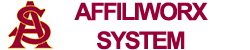
<style>
.page{position:relative;width:250px;height:50px;background:#ffffff}
.page>*{position:absolute;margin:0}
.t1{font:24px "Arial-BoldMT";letter-spacing:-0.075em;color:#990033}
</style>
<div class="page">
<p class="t1" style="left:74px;top:2px;width:134px;height:48px;text-align:center">AFFILIWORX<br>SYSTEM</p>
</div>
